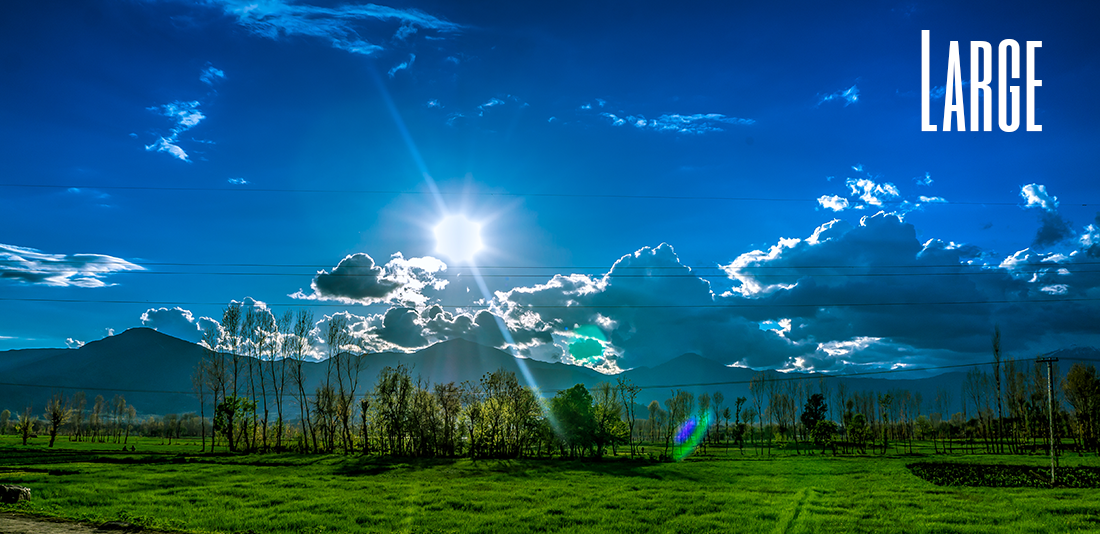
<style>
.page{position:relative;width:1100px;height:534px}
.page>*{position:absolute;margin:0}
.t1{font:120px "SixCaps";color:#ffffff}
</style>
<div class="page">
<p class="t1" style="left:921px;top:30px;width:121px;height:102px">Large</p>
</div>
